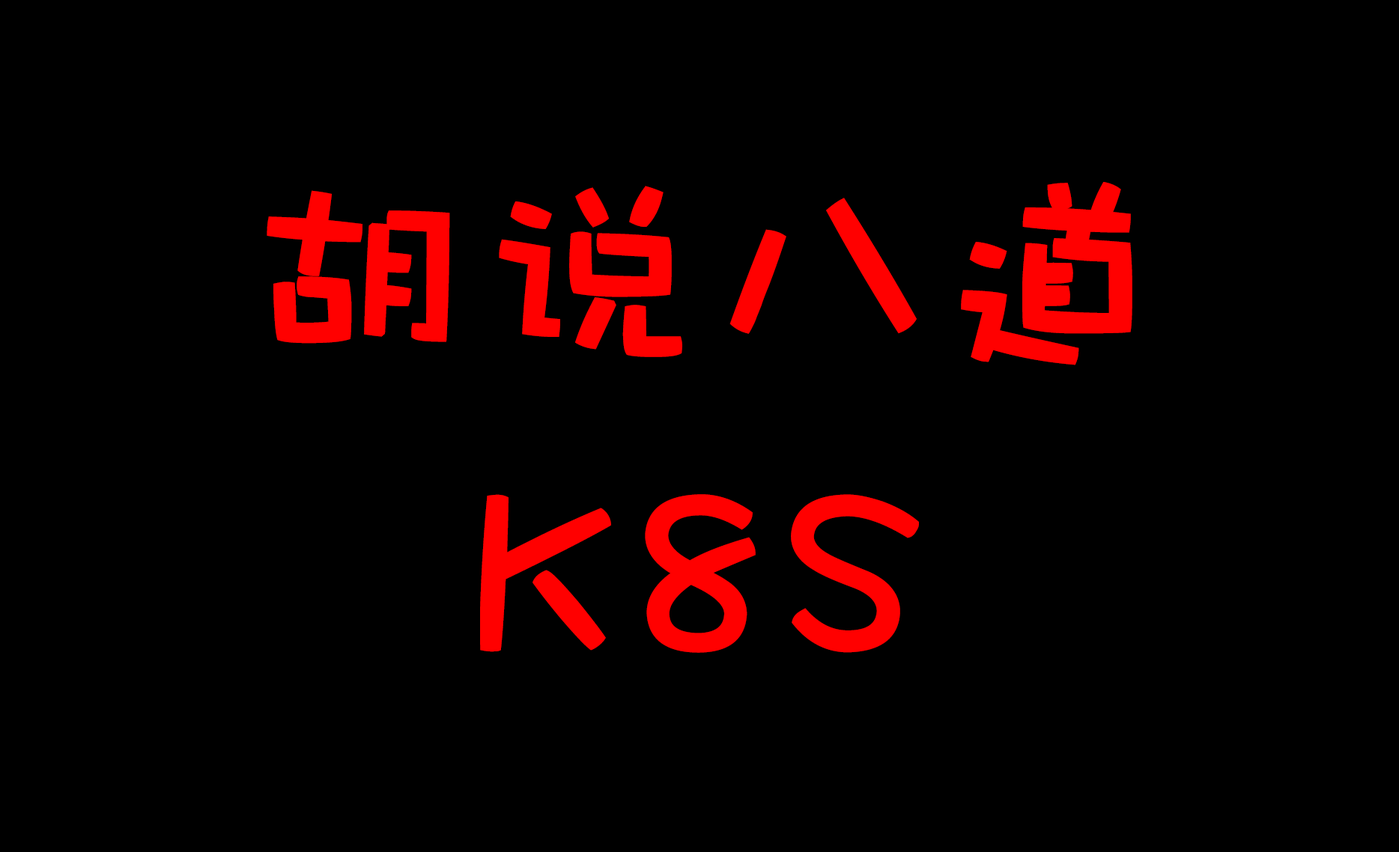
<style>
.page{position:relative;width:1399px;height:852px;background:#000000}
.page>*{position:absolute;margin:0}
.t1{font:224.7px "DFWaWaSC-W5";color:#ff0000;font-weight:bold}
</style>
<div class="page">
<p class="t1" style="left:267px;top:182px;width:865px;height:183px">胡说八道</p>
<p class="t1" style="left:480px;top:494px;width:439px;height:159px">K8S</p>
</div>
